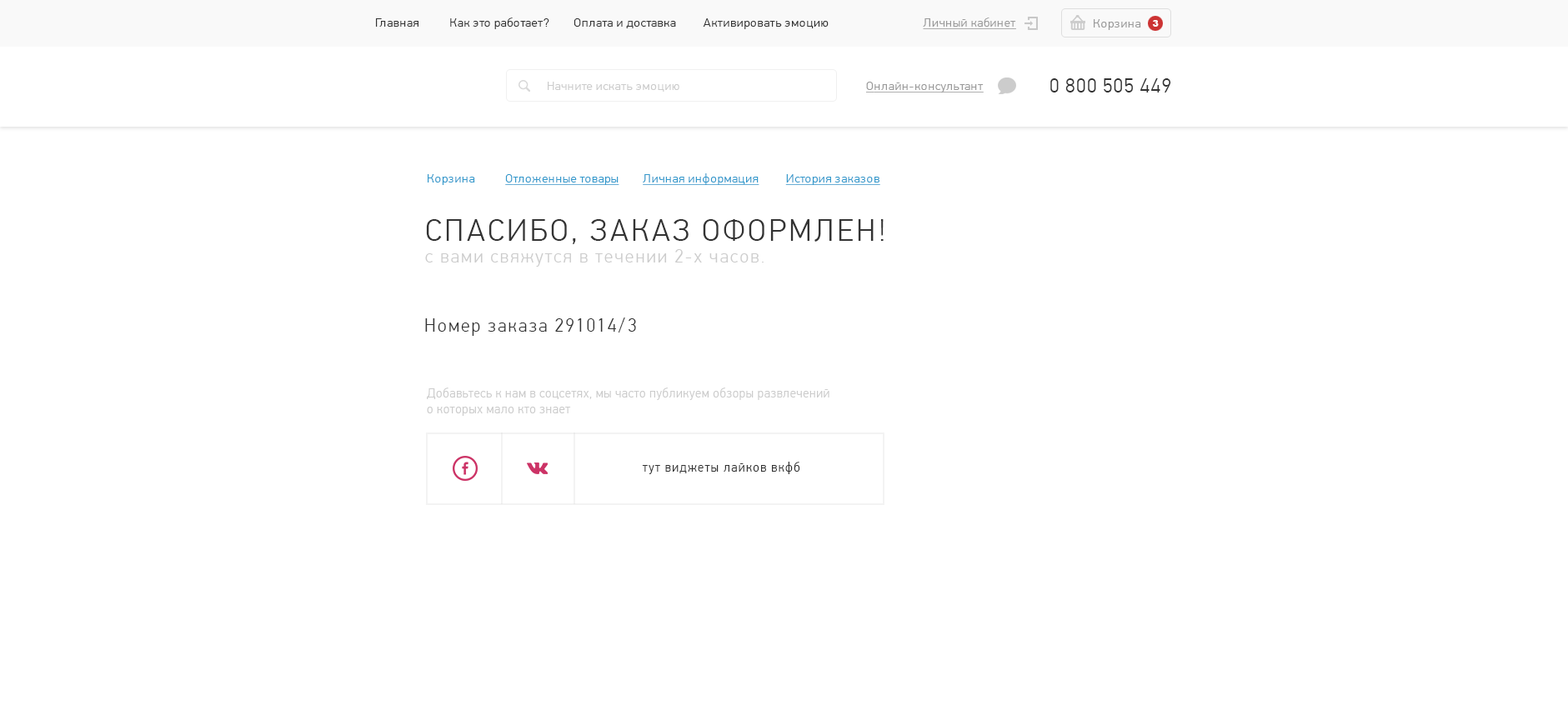
<style>
.page{position:relative;width:1568px;height:705px;background:#ffffff}
.page>*{position:absolute;margin:0}
.t1{font:12.5px "PFDinTextPro-Light";letter-spacing:0.04em;color:#333333}
.t2{font:12.5px "PFDinTextPro-Light";letter-spacing:0.04em;color:#333333;text-transform:uppercase}
.t3{font:12.5px "PFDinTextPro-Light";letter-spacing:0.04em;color:#999999;text-decoration:underline}
.t4{font:12.5px "PFDinTextPro-Light";letter-spacing:0.04em;color:#999999;text-transform:uppercase;text-decoration:underline}
.t5{font:12.5px "PFDinTextPro-Light";letter-spacing:0.04em;color:#999999}
.t6{font:12.5px "PFDinTextPro-Light";letter-spacing:0.04em;color:#999999;text-transform:uppercase}
.t7{font:9.2px "Arial-Black";letter-spacing:0.04em;color:#ffffff;text-transform:uppercase}
.t8{font:12.5px "PFDinTextPro-Light";letter-spacing:0.04em;color:#cccccc}
.t9{font:20px "PFDinTextPro-Light";letter-spacing:0.04em;color:#333333;text-transform:uppercase}
.t10{font:12.5px "PFDinTextPro-Light";letter-spacing:0.04em;color:#3399cc;text-decoration:underline}
.t11{font:12.5px "PFDinTextPro-Light";letter-spacing:0.04em;color:#3399cc}
.t12{font:12.5px "PFDinTextPro-Light";letter-spacing:0.04em;color:#3399cc;text-transform:uppercase;text-decoration:underline}
.t13{font:19.1px/21.7px "PFDinTextPro-Light";letter-spacing:0.09em;color:#cccccc;scale:0.96 1}
.t14{font:32.1px/21.7px "PFDinTextPro-Light";letter-spacing:0.09em;color:#333333;text-transform:uppercase;scale:0.96 1}
.t15{font:19.1px "PFDinTextPro-Light";letter-spacing:0.09em;color:#333333;scale:0.96 1}
.t16{font:13px/15.8px "PFDinTextPro-Light";letter-spacing:0.04em;color:#cccccc;scale:0.96 1}
.t17{font:13px/15.8px "PFDinTextPro-Light";letter-spacing:0.04em;color:#cccccc;text-transform:uppercase;scale:0.96 1}
.t18{font:13px "PFDinTextPro-Light";letter-spacing:0.09em;color:#333333;scale:0.96 1}
</style>
<div class="page">
<p class="t1" style="left:376px;top:18px;width:453px;height:11px"><span class="t2">Г</span>лавная          <span class="t2">к</span>ак это работает?        Оплата и доставка         Активировать эмоцию</p>
<p class="t3" style="left:923px;top:18px;width:93px;height:11px"><span class="t4">л</span>ичный кабинет</p>
<p class="t5" style="left:1094px;top:19px;width:47px;height:11px"><span class="t6">К</span>орзина</p>
<p class="t7" style="left:1152px;top:20px;width:7px;height:7px">3</p>
<p class="t8" style="left:548px;top:82px;width:131px;height:10px">Начните искать эмоцию</p>
<p class="t3" style="left:866px;top:82px;width:118px;height:11px"><span class="t4">О</span>нлайн-консультант</p>
<p class="t9" style="left:1050px;top:78px;width:121px;height:15px">0 800 505 449</p>
<p class="t10" style="left:428px;top:173px;width:452px;height:12px"><span class="t11">Корзина          </span><span class="t12">О</span>тложенные товары        Личная информация         История заказов</p>
<p class="t13" style="left:425px;top:219px;width:459px;height:48px"><span class="t14">Спасибо, заказ оформлен!<br></span>с вами свяжутся в течении 2-х часов.</p>
<p class="t15" style="left:425px;top:318px;width:211px;height:18px">Номер заказа 291014/3</p>
<p class="t16" style="left:427px;top:388px;width:402px;height:28px"><span class="t17">Д</span>обавьтесь к нам в соцсетях, мы часто публикуем обзоры развлечений<br>о которых мало кто знает</p>
<p class="t18" style="left:642px;top:462px;width:158px;height:12px">тут виджеты лайков вкфб</p>
</div>
